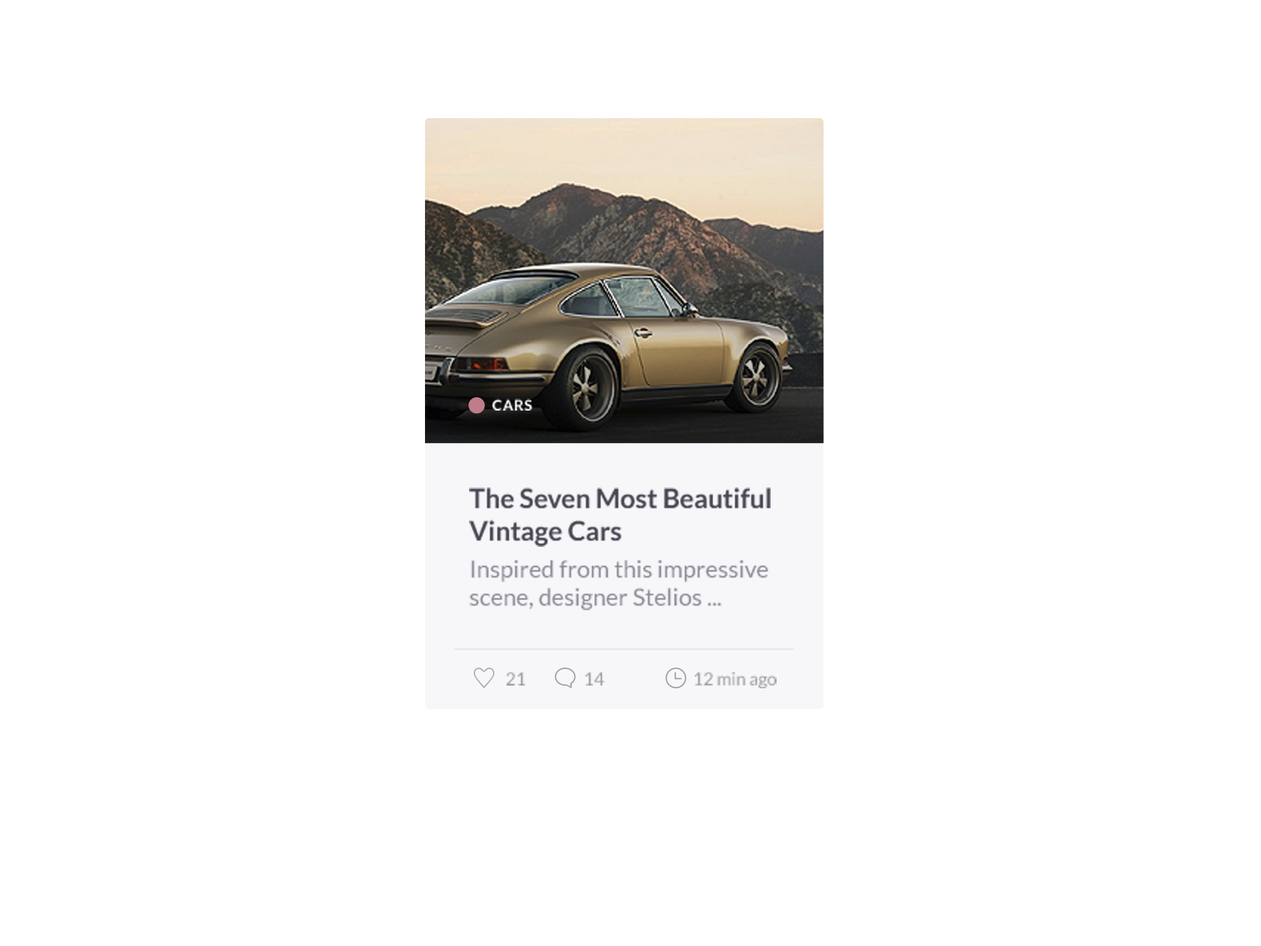
<style>
.page{position:relative;width:1261px;height:946px;background:#ffffff}
.page>*{position:absolute;margin:0}
.t1{font:14.8px "Lato-Bold";letter-spacing:0.05em;color:#ffffff}
.t2{font:26.6px "Lato-Bold";color:#454553}
.t3{font:23.6px "Lato-Regular";letter-spacing:0.003em;color:#8c8c99}
.t4{font:17.7px "Lato-Regular";color:#9f9fa6}
.t5{font:17.7px "Lato-Regular";color:#9f9fa7}
</style>
<div class="page">
<p class="t1" style="left:492px;top:398px;width:40px;height:12px">CARS</p>
<p class="t2" style="left:469px;top:487px;width:302px;height:59px">The Seven Most Beautiful <br>Vintage Cars</p>
<p class="t3" style="left:469px;top:560px;width:300px;height:50px">Inspired from this impressive <br>scene, designer Stelios ...</p>
<p class="t4" style="left:506px;top:672px;width:19px;height:13px">21</p>
<p class="t5" style="left:585px;top:672px;width:20px;height:13px">14</p>
<p class="t4" style="left:694px;top:672px;width:83px;height:16px">12 min ago</p>
</div>
